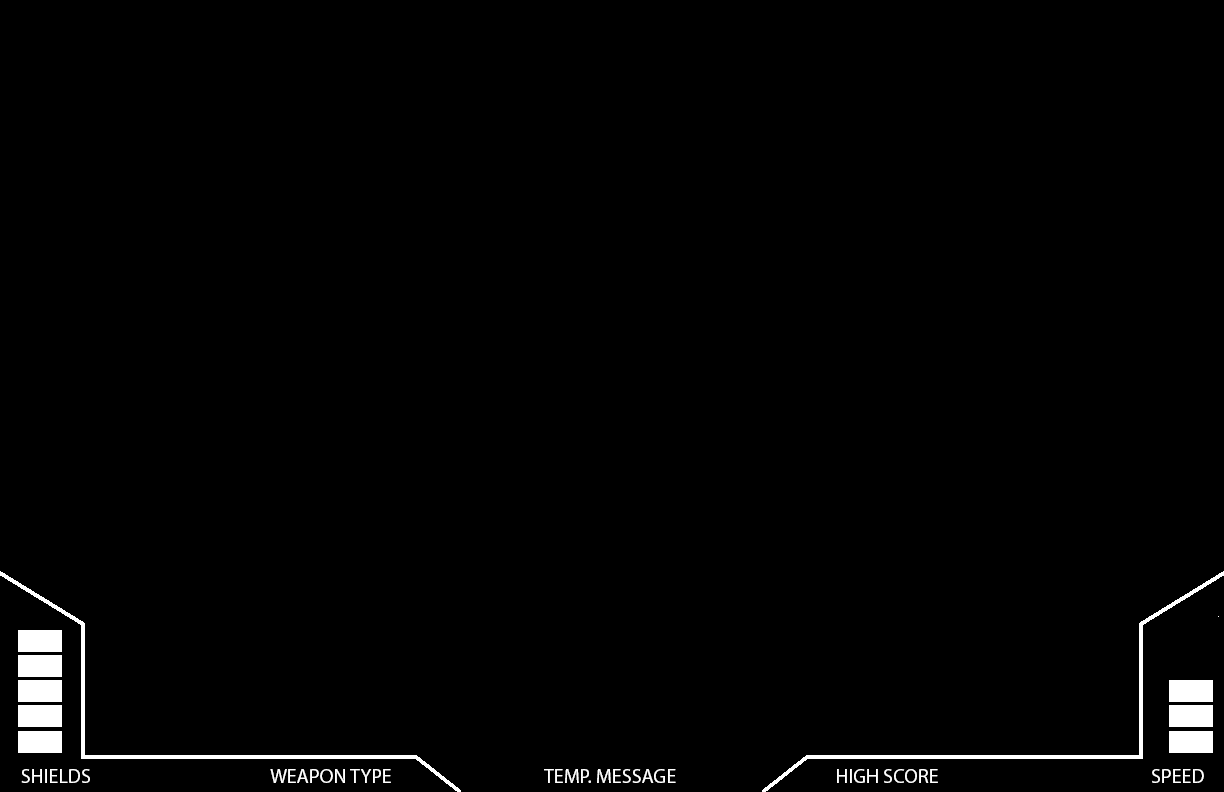
<style>
.page{position:relative;width:1224px;height:792px;background:#000000}
.page>*{position:absolute;margin:0}
.t1{font:20px "MyriadPro-Regular";color:#ffffff}
</style>
<div class="page">
<p class="t1" style="left:21px;top:769px;width:69px;height:14px">SHIELDS</p>
<p class="t1" style="left:270px;top:769px;width:121px;height:14px">WEAPON TYPE</p>
<p class="t1" style="left:544px;top:769px;width:132px;height:14px">TEMP. MESSAGE</p>
<p class="t1" style="left:837px;top:769px;width:101px;height:14px">HIGH SCORE</p>
<p class="t1" style="left:1152px;top:769px;width:52px;height:14px">SPEED</p>
</div>
